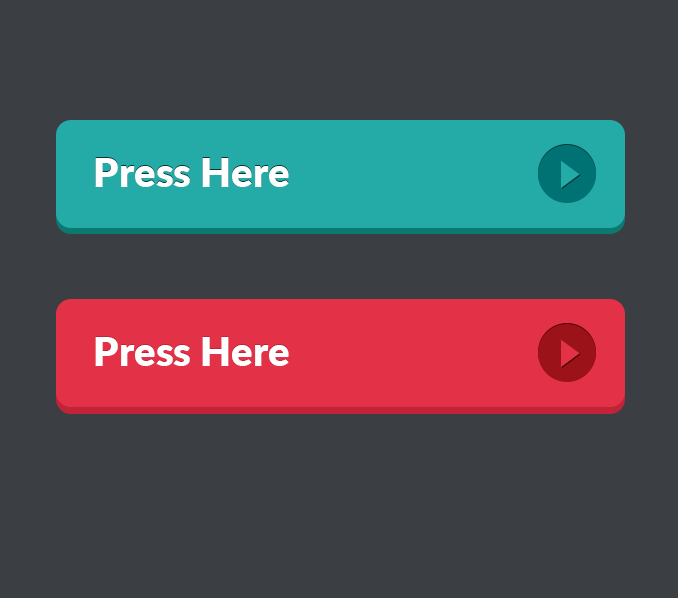
<style>
.page{position:relative;width:678px;height:598px;background:#3b3e42}
.page>*{position:absolute;margin:0}
.t1{font:40px "Lato-Black";color:#ffffff}
.t2{font:28.4px "KozGoPr6N-Regular";color:#24aaa7}
.t3{font:28.4px "KozGoPr6N-Regular";color:#e33247}
</style>
<div class="page">
<p class="t1" style="left:95px;top:158px;width:194px;height:29px">Press Here</p>
<p class="t2" style="left:561px;top:160px;width:19px;height:28px">▶︎</p>
<p class="t1" style="left:95px;top:337px;width:194px;height:29px">Press Here</p>
<p class="t3" style="left:561px;top:339px;width:19px;height:28px">▶︎</p>
</div>
